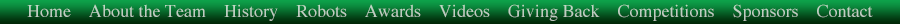
<style>
.page{position:relative;width:900px;height:24px}
.page>*{position:absolute;margin:0}
.t1{font:18px "Times-Roman";color:#becec2}
</style>
<div class="page">
<p class="t1" style="left:27px;top:4px;width:846px;height:17px">Home    About the Team    History    Robots    Awards    Videos    Giving Back    Competitions    Sponsors    Contact</p>
</div>
